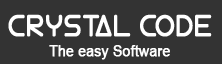
<style>
.page{position:relative;width:222px;height:64px;background:#333333}
.page>*{position:absolute;margin:0}
.t1{font:31px "ElectroShackle";color:#ffffff;font-weight:bold;scale:0.85 1}
.t2{font:15px "ArialNarrow";color:#ffffff;font-weight:bold;scale:1.11 1}
</style>
<div class="page">
<p class="t1" style="left:8px;top:14px;width:204px;height:23px">CRYSTAL CODE</p>
<p class="t2" style="left:49px;top:45px;width:121px;height:15px">The easy Software</p>
</div>
